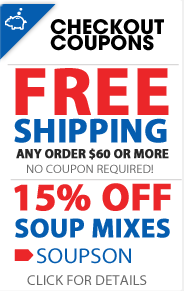
<style>
.page{position:relative;width:184px;height:291px;background:#ffffff}
.page>*{position:absolute;margin:0}
.t1{font:20px "AvantGarde-Bold";color:#000000;text-transform:uppercase}
.t2{font:68px "MyriadPro-Bold";letter-spacing:0.02em;color:#eb2629;text-transform:uppercase;font-weight:bold}
.t3{font:34px "MyriadPro-Bold";color:#055daf;text-transform:uppercase;font-weight:bold}
.t4{font:13px "MyriadPro-Bold";color:#282828;text-transform:uppercase;font-weight:bold;scale:0.97 1}
.t5{font:11.9px "MyriadPro-Regular";color:#696969;text-transform:uppercase;scale:1.06 1}
.t6{font:39px "MyriadPro-Bold";color:#eb2629;text-transform:uppercase;font-weight:bold}
.t7{font:27px "MyriadPro-Bold";color:#055daf;text-transform:uppercase;font-weight:bold}
.t8{font:21.6px "MyriadPro-Regular";color:#055daf;text-transform:uppercase;scale:1.06 1}
.t9{font:14px "MyriadPro-Regular";color:#696969;text-transform:uppercase;scale:1.06 1}
</style>
<div class="page">
<p class="t1" style="left:50px;top:19px;width:114px;height:16px">Checkout</p>
<p class="t1" style="left:50px;top:35px;width:104px;height:16px">cOUPONS</p>
<p class="t2" style="left:15px;top:68px;width:154px;height:47px">FREE</p>
<p class="t3" style="left:14px;top:118px;width:153px;height:25px">SHIPPING</p>
<p class="t4" style="left:16px;top:148px;width:153px;height:12px">ANY order $60 or more</p>
<p class="t5" style="left:27px;top:164px;width:126px;height:10px">no coupon required!</p>
<p class="t6" style="left:14px;top:183px;width:157px;height:28px">15% off</p>
<p class="t7" style="left:15px;top:218px;width:155px;height:20px">Soup mixes</p>
<p class="t8" style="left:37px;top:248px;width:94px;height:16px">SOUPSON</p>
<p class="t9" style="left:27px;top:275px;width:120px;height:10px">click for details</p>
</div>
